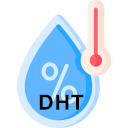
<style>
.page{position:relative;width:128px;height:128px;background:#ffffff}
.page>*{position:absolute;margin:0}
.t1{font:21.3px "AcuminConcept-Semibold";letter-spacing:0.05em;color:#030000;font-style:italic}
</style>
<div class="page">
<p class="t1" style="left:39px;top:94px;width:45px;height:16px">DHT</p>
</div>
